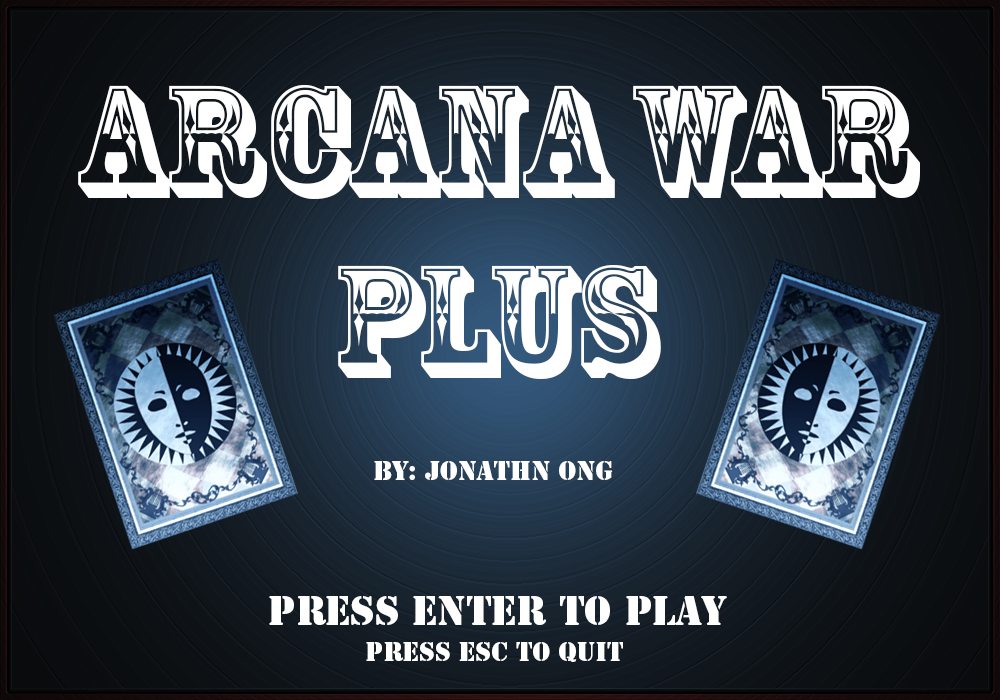
<style>
.page{position:relative;width:1000px;height:700px}
.page>*{position:absolute;margin:0}
.t1{font:150px "RosewoodStd-Regular";color:#ffffff}
.t2{font:25px "StencilStd";color:#ffffff}
.t3{font:38.4px "StencilStd";color:#ffffff}
</style>
<div class="page">
<p class="t1" style="left:78px;top:85px;width:842px;height:294px;text-align:center">Arcana war<br>plus</p>
<p class="t2" style="left:374px;top:461px;width:239px;height:19px">BY: JONATHN ONG</p>
<p class="t3" style="left:269px;top:596px;width:458px;height:29px">Press Enter To Play</p>
<p class="t2" style="left:366px;top:642px;width:257px;height:20px">Press ESC to Quit</p>
</div>
